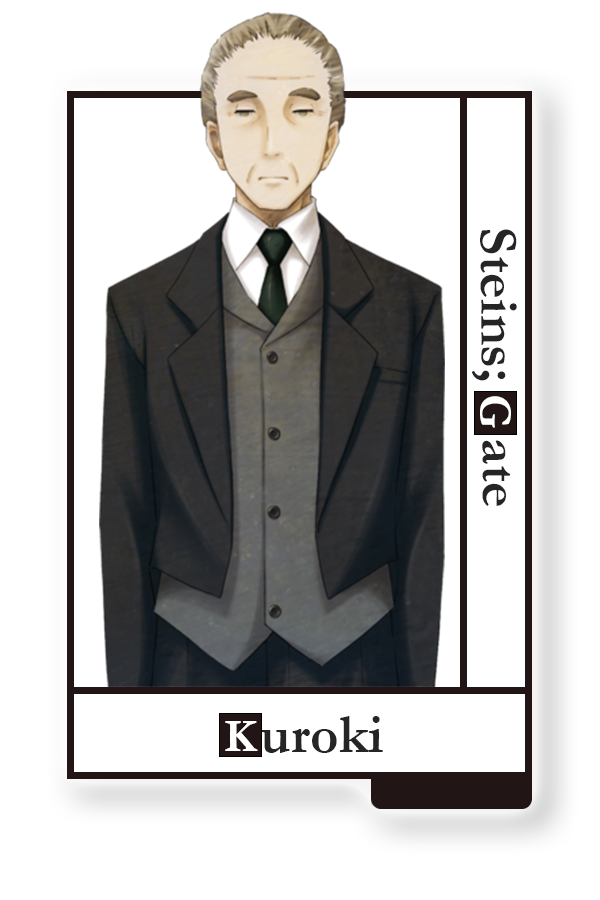
<style>
.page{position:relative;width:600px;height:900px;background:#ffffff}
.page>*{position:absolute;margin:0}
.t1{font:55.4px "Garamond-Bold";color:#252525}
.t2{font:47px "Garamond-Bold";color:#ffffff}
</style>
<div class="page">
<p class="t1" style="left:472px;top:229px;width:45px;height:277px;rotate:89deg">Steins;    ate</p>
<p class="t2" style="left:480px;top:396px;width:31px;height:32px;rotate:90deg">G</p>
<p class="t2" style="left:225px;top:721px;width:33px;height:30px">K</p>
<p class="t1" style="left:261px;top:716px;width:122px;height:37px">uroki</p>
</div>
